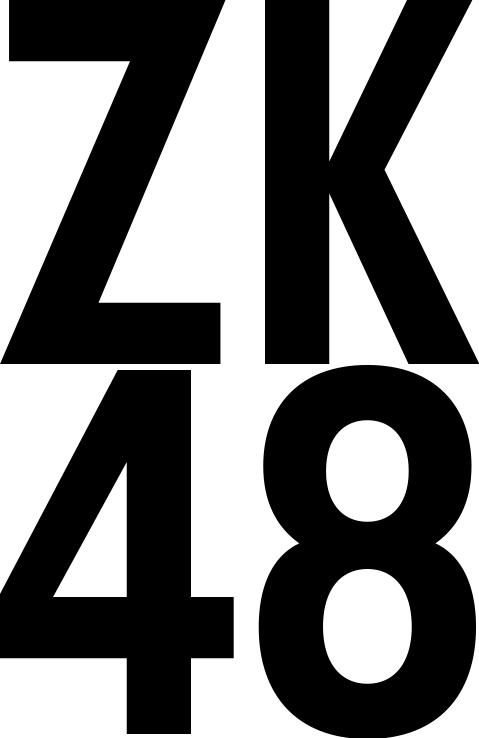
<style>
.page{position:relative;width:479px;height:738px;background:#000000}
.page>*{position:absolute;margin:0}
.t1{font:502px "Monofonto-Regular";color:#000000}
</style>
<div class="page">
<p class="t1" style="left:0px;top:0px;width:480px;height:364px">ZK</p>
<p class="t1" style="left:0px;top:364px;width:476px;height:375px">48</p>
</div>
